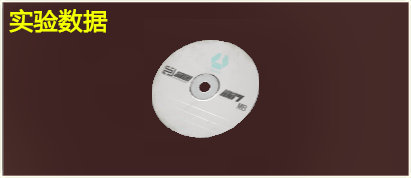
<style>
.page{position:relative;width:411px;height:178px}
.page>*{position:absolute;margin:0}
.t1{font:24px "MicrosoftYaHeiUI";color:#f4ff00;font-weight:bold}
</style>
<div class="page">
<p class="t1" style="left:9px;top:9px;width:99px;height:24px">实验数据</p>
</div>
